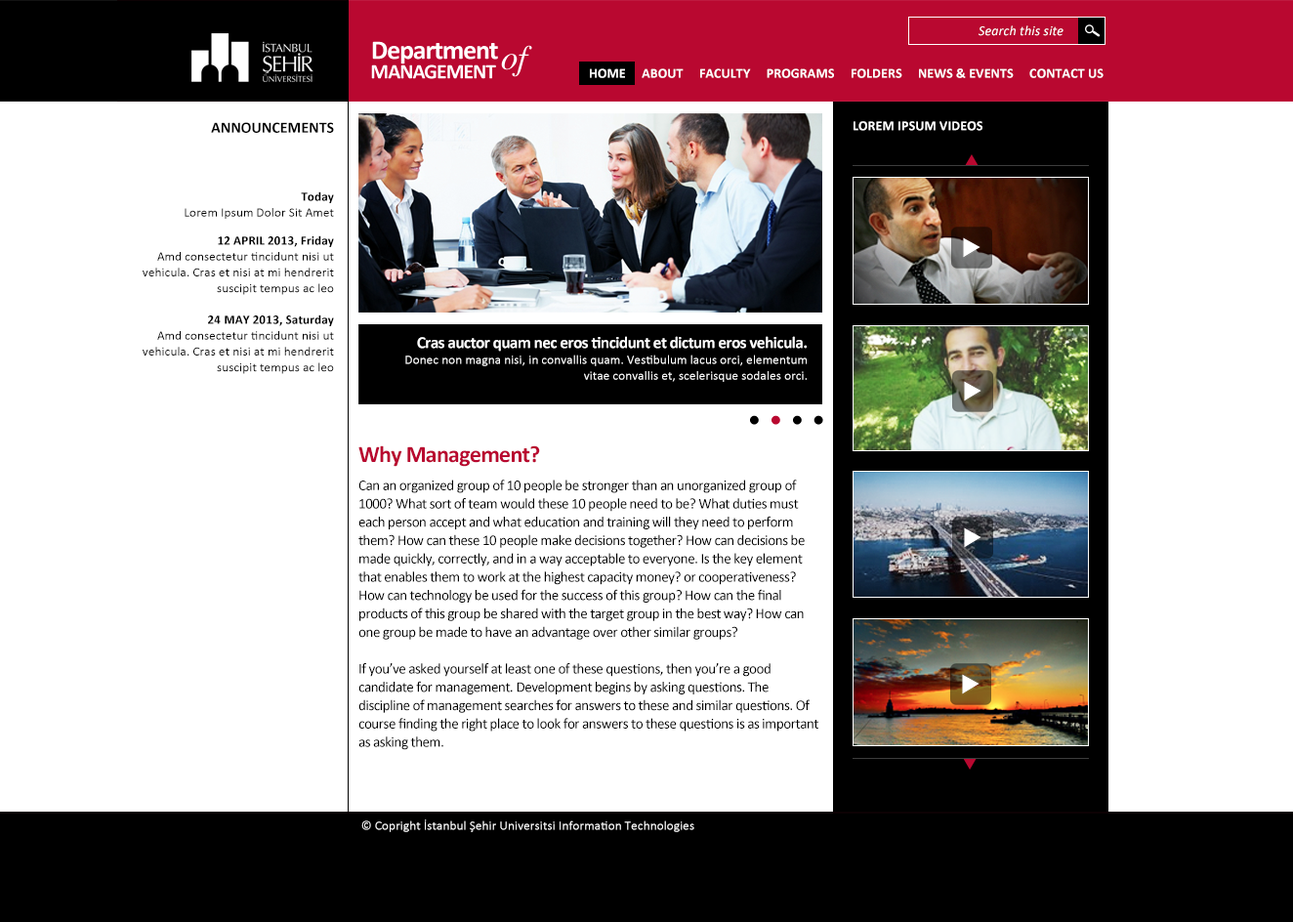
<style>
.page{position:relative;width:1293px;height:922px;background:#ffffff}
.page>*{position:absolute;margin:0}
.t1{font:13.7px "Calibri-Italic";letter-spacing:0.01em;color:#ffffff}
.t2{font:13.6px "Calibri-Bold";letter-spacing:0.01em;color:#ffffff}
.t3{font:15.3px "Calibri-Bold";letter-spacing:0.01em;color:#000000}
.t4{font:12.8px/15.8px "Calibri";letter-spacing:0.01em;color:#000000}
.t5{font:12.8px/15.8px "Calibri-Bold";letter-spacing:0.01em;color:#000000}
.t6{font:12.8px/15.8px "Calibri";letter-spacing:0.01em;color:#ffffff}
.t7{font:16.7px/15.8px "Calibri-Bold";letter-spacing:-0.03em;color:#ffffff}
.t8{font:82.6px "Baskerville";letter-spacing:0.01em;color:#000000}
.t9{font:82.6px "Baskerville";letter-spacing:0.01em;color:#b90830}
.t10{font:14.7px/18.3px "Calibri";letter-spacing:-0.03em;color:#000000}
.t11{font:23.4px/18.3px "Calibri-Bold";letter-spacing:-0.03em;color:#b90830}
.t12{font:14.7px/28.1px "Calibri";letter-spacing:-0.03em;color:#000000}
.t13{font:12.8px "Calibri";letter-spacing:0.01em;color:#ffffff}
</style>
<div class="page">
<p class="t1" style="left:979px;top:25px;width:85px;height:11px">Search this site</p>
<p class="t2" style="left:590px;top:68px;width:514px;height:10px">HOME     ABOUT     FACULTY     PROGRAMS     FOLDERS     NEWS &amp; EVENTS     CONTACT US</p>
<p class="t3" style="left:211px;top:122px;width:123px;height:11px">ANNOUNCEMENTS</p>
<p class="t2" style="left:854px;top:121px;width:129px;height:10px">LOREM IPSUM VIDEOS</p>
<p class="t4" style="left:185px;top:191px;width:149px;height:28px;text-align:right"><span class="t5">Today<br></span>Lorem Ipsum Dolor Sit Amet</p>
<p class="t4" style="left:143px;top:235px;width:191px;height:139px;text-align:right"><span class="t5">12 APRIL 2013, Friday<br></span>Amd consectetur tincidunt nisi ut vehicula. Cras et nisi at mi hendrerit suscipit tempus ac leo<br><br><span class="t5">24 MAY 2013, Saturday<br></span>Amd consectetur tincidunt nisi ut vehicula. Cras et nisi at mi hendrerit suscipit tempus ac leo</p>
<p class="t6" style="left:405px;top:336px;width:402px;height:46px;text-align:right"><span class="t7">Cras auctor quam nec eros tincidunt et dictum eros vehicula.<br></span>Donec non magna nisi, in convallis quam. Vestibulum lacus orci, elementum vitae convallis et, scelerisque sodales orci.</p>
<p class="t8" style="left:750px;top:415px;width:73px;height:10px">.<span class="t9">.</span>..</p>
<p class="t10" style="left:358px;top:445px;width:461px;height:305px"><span class="t11">Why Management?<br></span><span class="t12">Can an organized group of 10 people be stronger than an unorganized group of </span>1000? What sort of team would these 10 people need to be? What duties must each person accept and what education and training will they need to perform them? How can these 10 people make decisions together? How can decisions be made quickly, correctly, and in a way acceptable to everyone. Is the key element that enables them to work at the highest capacity money? or cooperativeness? How can technology be used for the success of this group? How can the final products of this group be shared with the target group in the best way? How can one group be made to have an advantage over other similar groups?<br><br>If you’ve asked yourself at least one of these questions, then you’re a good candidate for management. Development begins by asking questions. The discipline of management searches for answers to these and similar questions. Of course finding the right place to look for answers to these questions is as important as asking them.</p>
<p class="t13" style="left:361px;top:819px;width:333px;height:13px">© Copright İstanbul Şehir Universitsi Information Technologies</p>
</div>
